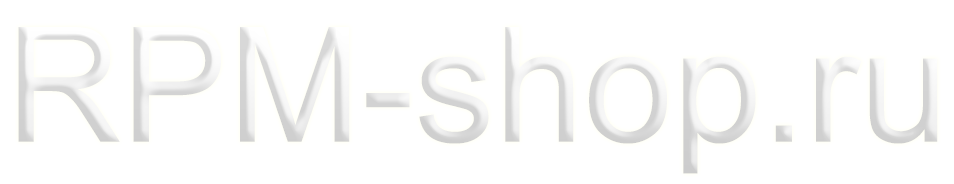
<style>
.page{position:relative;width:954px;height:184px;background:#ffffff}
.page>*{position:absolute;margin:0}
.t1{font:160px "ArialUnicodeMS";color:#e6e6e6}
</style>
<div class="page">
<p class="t1" style="left:18px;top:27px;width:920px;height:147px">RPM-shop.ru</p>
</div>
